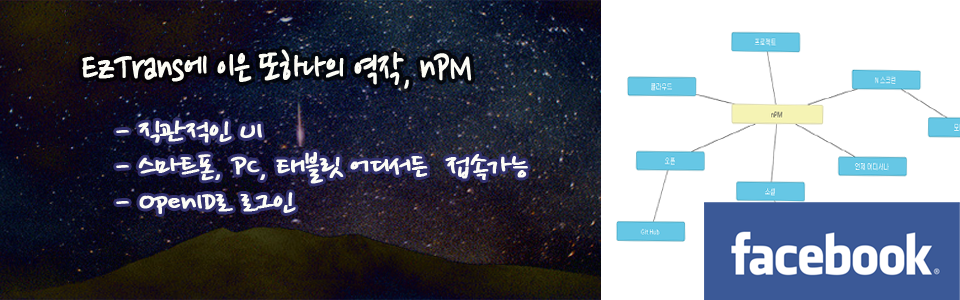
<style>
.page{position:relative;width:960px;height:300px;background:#ffffff}
.page>*{position:absolute;margin:0}
.t1{font:47.8px "NanumPen";letter-spacing:-0.05em;color:#fcfcf5;font-weight:bold;scale:0.78 1}
.t2{font:31.4px/35.9px "NanumPen";letter-spacing:-0.05em;color:#fcfcf5;font-weight:bold;scale:1.21 1}
</style>
<div class="page">
<p class="t1" style="left:82px;top:49px;width:390px;height:40px">EzTrans에 이은 또하나의 역작, nPM</p>
<p class="t2" style="left:116px;top:120px;width:412px;height:94px">- 직관적인 UI<br>- 스마트폰, PC, 태블릿 어디서든  접속가능<br>- OpenID로 로그인</p>
</div>
